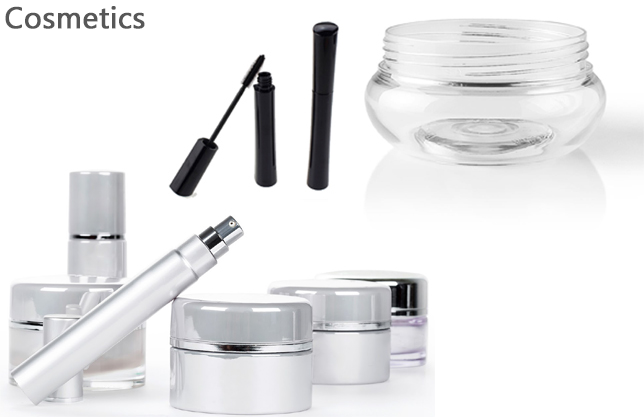
<style>
.page{position:relative;width:644px;height:420px;background:#ffffff}
.page>*{position:absolute;margin:0}
.t1{font:30px "Gadugi";color:#575757;font-weight:bold}
</style>
<div class="page">
<p class="t1" style="left:5px;top:6px;width:140px;height:23px">Cosmetics</p>
</div>
